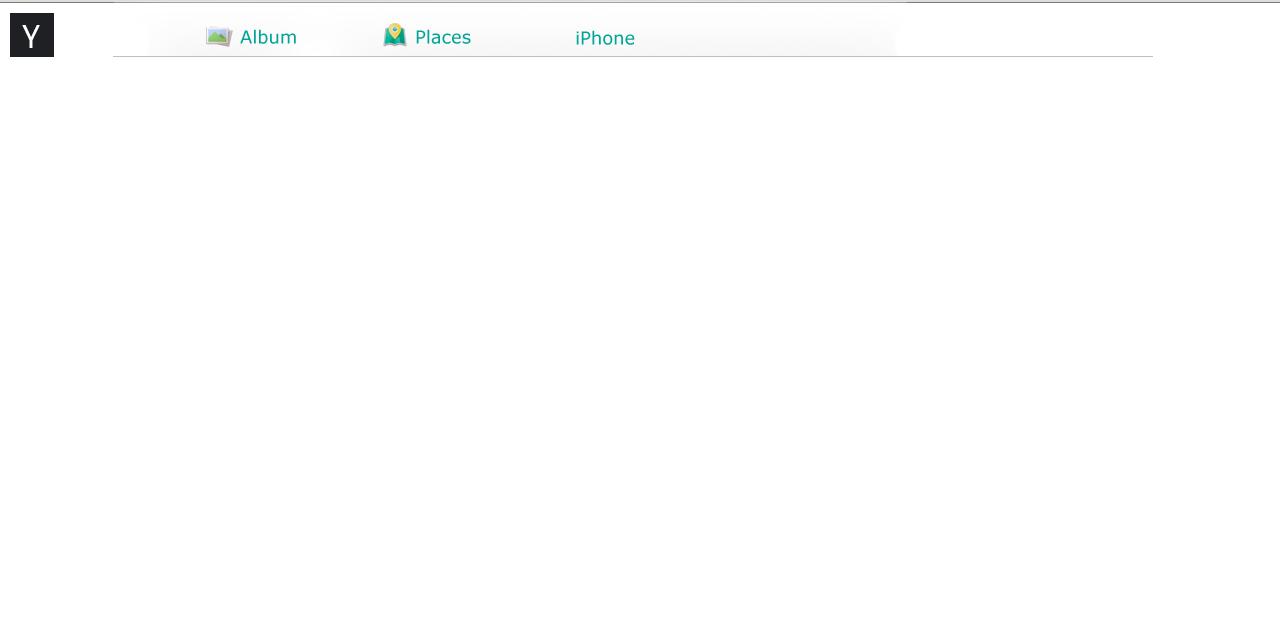
<style>
.page{position:relative;width:1280px;height:641px;background:#ffffff}
.page>*{position:absolute;margin:0}
.t1{font:18px "Verdana";color:#00a597}
</style>
<div class="page">
<p class="t1" style="left:240px;top:29px;width:56px;height:15px">Album</p>
<p class="t1" style="left:416px;top:29px;width:55px;height:15px">Places</p>
<p class="t1" style="left:576px;top:30px;width:59px;height:15px">iPhone</p>
</div>
